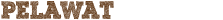
<style>
.page{position:relative;width:223px;height:20px;background:#ffffff}
.page>*{position:absolute;margin:0}
.t1{font:24px "ScribbleBoxDEMO";color:#684121}
</style>
<div class="page">
<p class="t1" style="left:1px;top:1px;width:113px;height:19px">Pelawat</p>
</div>
